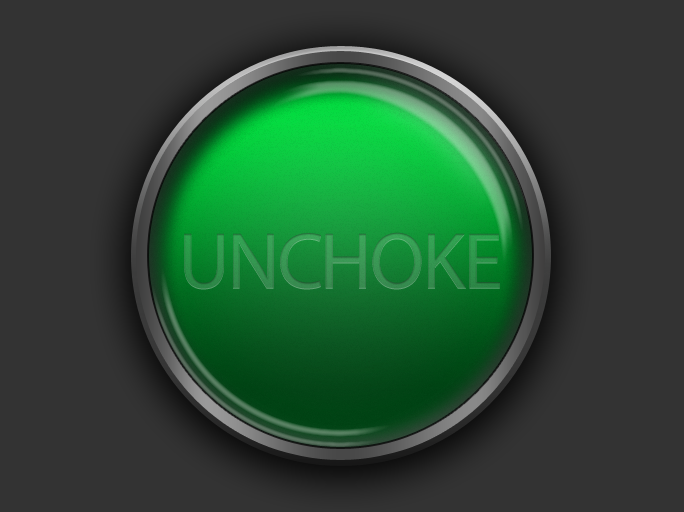
<style>
.page{position:relative;width:684px;height:512px;background:#333333}
.page>*{position:absolute;margin:0}
.t1{font:80px "MyriadPro-Regular";letter-spacing:-0.015em;color:#33924f;text-transform:uppercase}
</style>
<div class="page">
<p class="t1" style="left:184px;top:232px;width:316px;height:57px">Unchoke</p>
</div>
